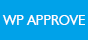
<style>
.page{position:relative;width:88px;height:40px;background:#00a2e9}
.page>*{position:absolute;margin:0}
.t1{font:13.9px "Humanist521BT-Roman";color:#fefefe}
</style>
<div class="page">
<p class="t1" style="left:2px;top:15px;width:83px;height:10px">WP APPROVE</p>
</div>
